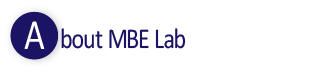
<style>
.page{position:relative;width:320px;height:72px;background:#ffffff}
.page>*{position:absolute;margin:0}
.t1{font:43.2px "Calibri";color:#ffffff;scale:0.83 1}
.t2{font:28.8px "Calibri";color:#1b1464;scale:0.83 1}
</style>
<div class="page">
<p class="t1" style="left:24px;top:21px;width:21px;height:28px">A</p>
<p class="t2" style="left:61px;top:28px;width:125px;height:21px">bout MBE Lab</p>
</div>
